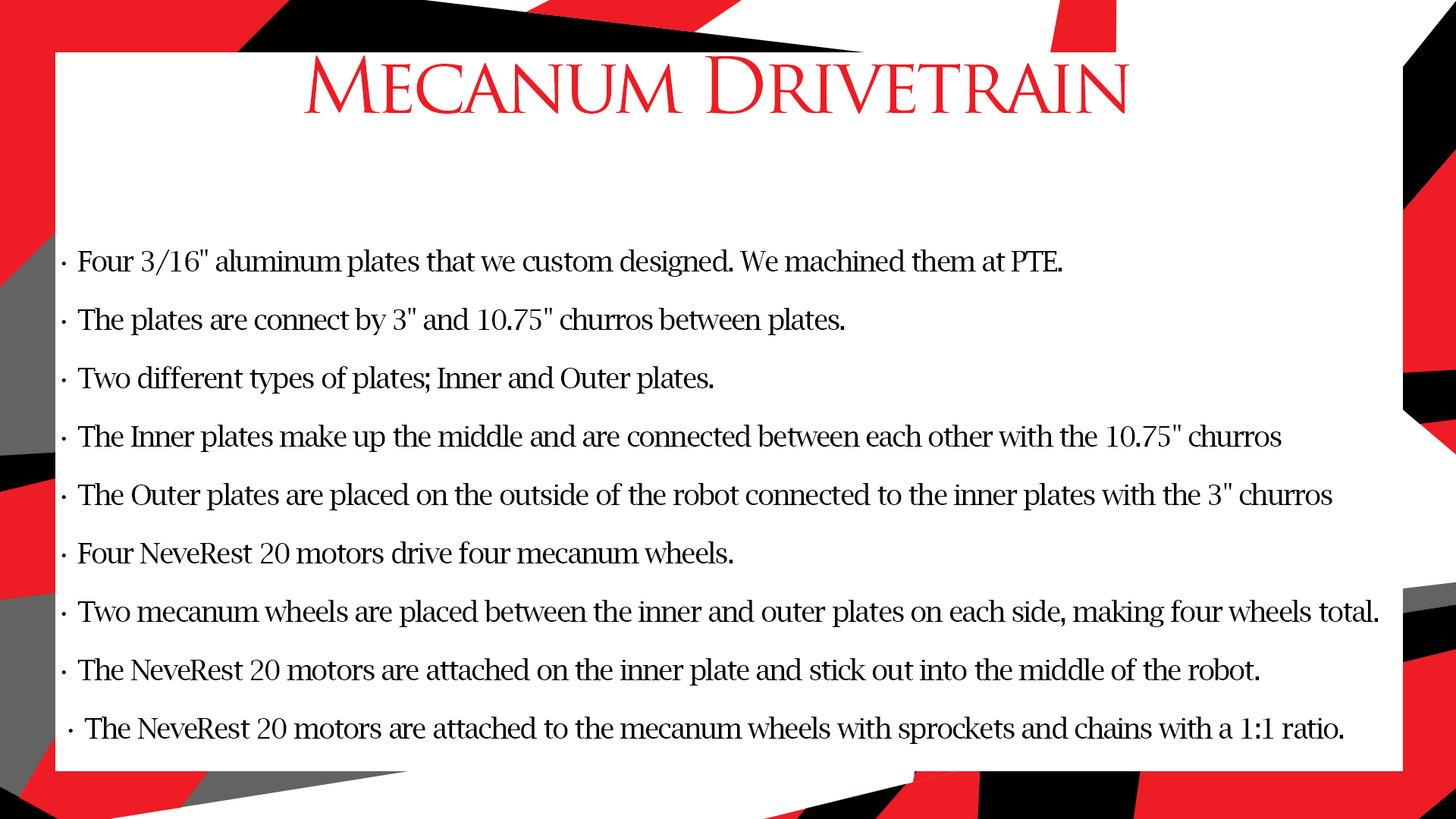
<style>
.page{position:relative;width:1456px;height:819px;background:#ffffff}
.page>*{position:absolute;margin:0}
.t1{font:75.8px "TrajanPro-Regular";letter-spacing:-0.06em;color:#ee1c24}
.t2{font:28.1px/58.4px "LucidaBright";letter-spacing:-0.06em;color:#000000}
.t3{font:28.1px/58.4px "FranklinGothic-Heavy";letter-spacing:-0.06em;color:#000000}
</style>
<div class="page">
<p class="t1" style="left:304px;top:55px;width:826px;height:59px">Mecanum Drivetrain</p>
<p class="t2" style="left:61px;top:249px;width:1318px;height:495px"><span class="t3"> </span>• Four 3/16" aluminum plates that we custom designed. We machined them at PTE.<br> • The plates are connect by 3" and 10.75" churros between plates.<br> • Two different types of plates; Inner and Outer plates.<br> • The Inner plates make up the middle and are connected between each other with the 10.75" churros<br> • The Outer plates are placed on the outside of the robot connected to the inner plates with the 3" churros<br> • Four NeveRest 20 motors drive four mecanum wheels. <br> • Two mecanum wheels are placed between the inner and outer plates on each side, making four wheels total. <br> • The NeveRest 20 motors are attached on the inner plate and stick out into the middle of the robot.<br>     • The NeveRest 20 motors are attached to the mecanum wheels with sprockets and chains with a 1:1 ratio.</p>
</div>
